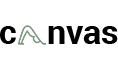
<style>
.page{position:relative;width:118px;height:70px;background:#ffffff}
.page>*{position:absolute;margin:0}
.t1{font:34px "Roboto-Bold";color:#000000}
</style>
<div class="page">
<p class="t1" style="left:0px;top:26px;width:16px;height:18px">c</p>
<p class="t1" style="left:48px;top:26px;width:70px;height:18px">nvas</p>
</div>
